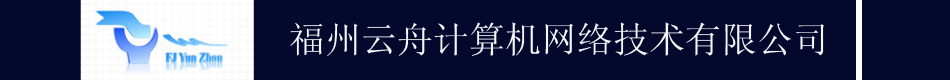
<style>
.page{position:relative;width:950px;height:80px;background:#03082c}
.page>*{position:absolute;margin:0}
.t1{font:36px "SimSun";color:#f7f7fa}
</style>
<div class="page">
<p class="t1" style="left:290px;top:22px;width:534px;height:34px">福州云舟计算机网络技术有限公司</p>
</div>
